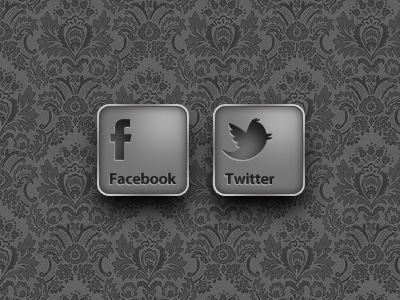
<style>
.page{position:relative;width:400px;height:300px}
.page>*{position:absolute;margin:0}
.t1{font:16px "MyriadPro-Bold";letter-spacing:-0.02em;color:#242424}
.t2{font:16px "MyriadPro-Bold";letter-spacing:-0.02em;color:#232323}
</style>
<div class="page">
<p class="t1" style="left:110px;top:172px;width:67px;height:13px">Facebook</p>
<p class="t2" style="left:225px;top:172px;width:50px;height:13px">Twitter</p>
</div>
